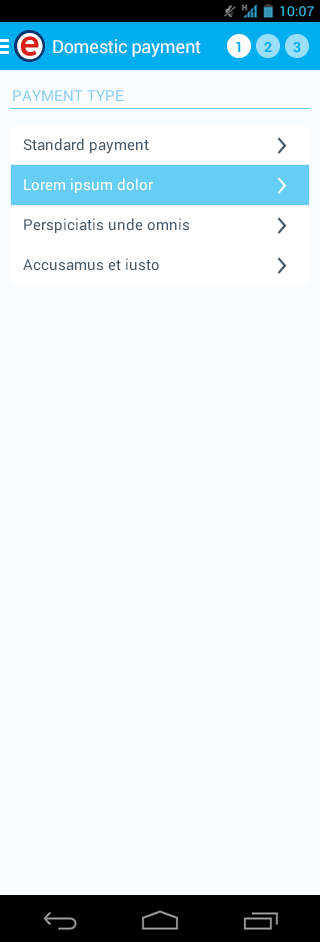
<style>
.page{position:relative;width:320px;height:942px;background:#f8fcfe}
.page>*{position:absolute;margin:0}
.t1{font:18px "Roboto-Regular";letter-spacing:-0.015em;color:#ffffff}
.t2{font:15px "Roboto-Regular";color:#89cef3}
.t3{font:15px "Roboto-Regular";color:#465866}
.t4{font:15px "Roboto-Regular";color:#ffffff}
</style>
<div class="page">
<p class="t1" style="left:53px;top:39px;width:148px;height:18px">Domestic payment</p>
<p class="t2" style="left:13px;top:90px;width:111px;height:11px">PAYMENT TYPE</p>
<p class="t3" style="left:23px;top:138px;width:126px;height:16px">Standard payment</p>
<p class="t4" style="left:24px;top:178px;width:129px;height:15px">Lorem ipsum dolor</p>
<p class="t3" style="left:24px;top:218px;width:165px;height:15px">Perspiciatis unde omnis</p>
<p class="t3" style="left:23px;top:258px;width:136px;height:13px">Accusamus et iusto</p>
</div>
